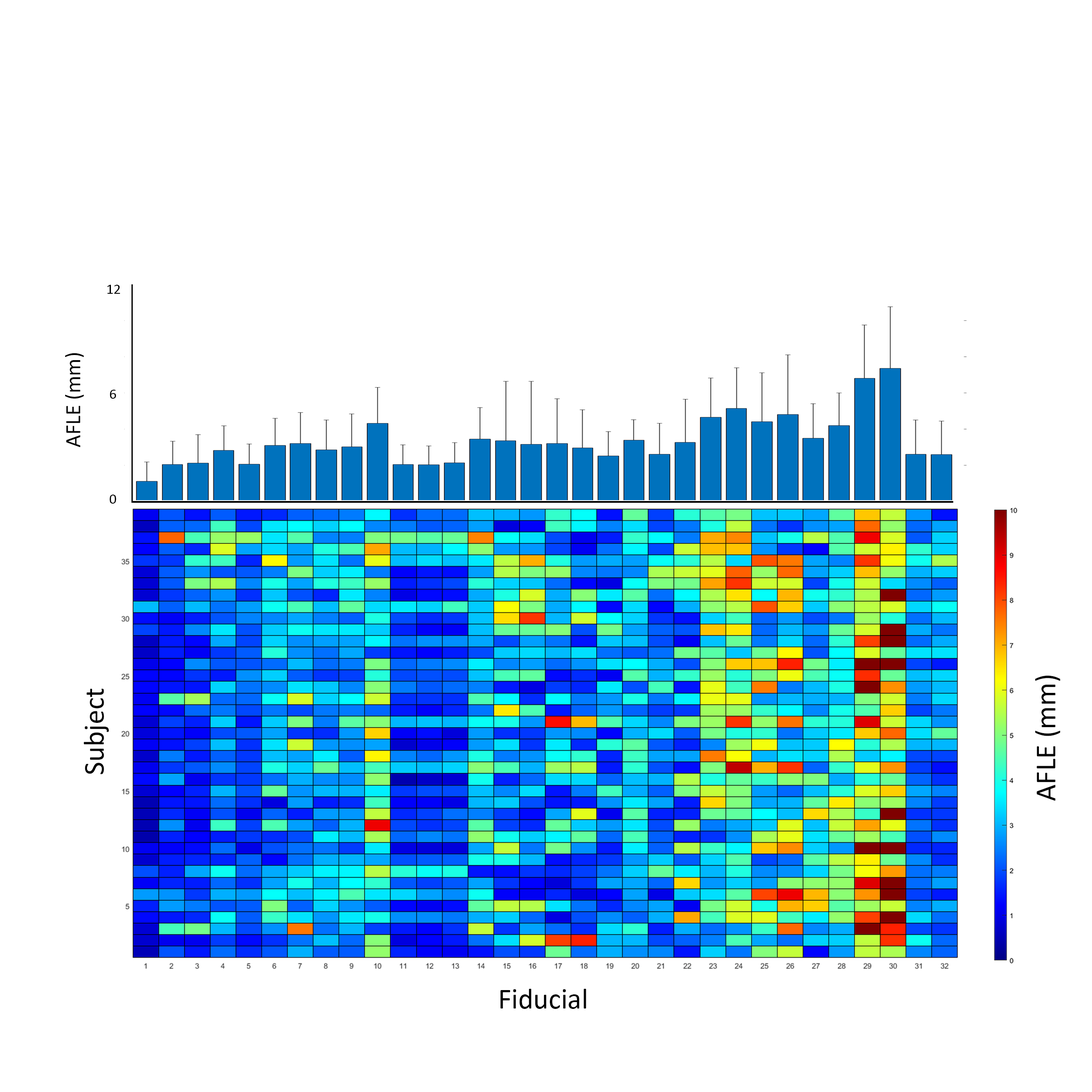
<style>
.page{position:relative;width:1092px;height:1092px;background:#ffffff}
.page>*{position:absolute;margin:0}
.t1{font:14.6px "Calibri";color:#000000}
.t2{font:21.8px "Calibri";color:#000000}
.t3{font:29.1px "Calibri";color:#000000}
</style>
<div class="page">
<p class="t1" style="left:107px;top:285px;width:13px;height:219px">12<br><br><br><br><br><br>   6<br><br><br><br><br><br>   0</p>
<p class="t2" style="left:65px;top:353px;width:19px;height:94px;rotate:-90deg">AFLE (mm)</p>
<p class="t3" style="left:1035px;top:675px;width:25px;height:126px;rotate:-90deg">AFLE (mm)</p>
<p class="t3" style="left:84px;top:689px;width:25px;height:85px;rotate:-90deg">Subject</p>
<p class="t3" style="left:500px;top:989px;width:86px;height:20px">Fiducial</p>
</div>
